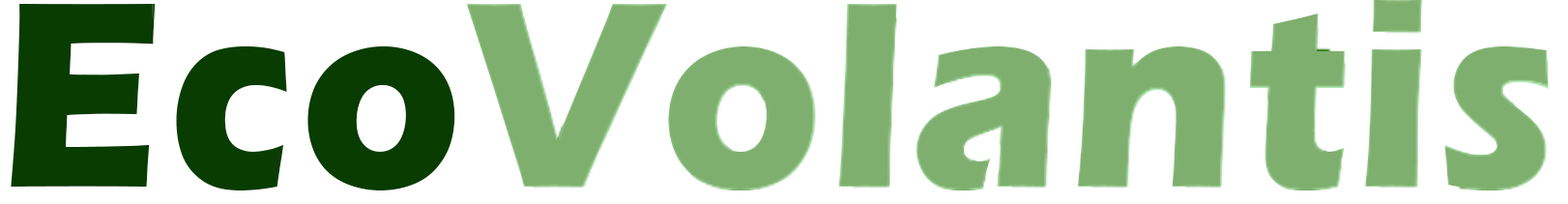
<style>
.page{position:relative;width:1568px;height:204px;background:#ffffff}
.page>*{position:absolute;margin:0}
.t1{font:471.4px "ErasITC-Bold";letter-spacing:0.025em;scale:0.9 1}
</style>
<div class="page">
<p class="t1" style="left:11px;top:0px;width:1538px;height:190px">EcoVolantis</p>
</div>
